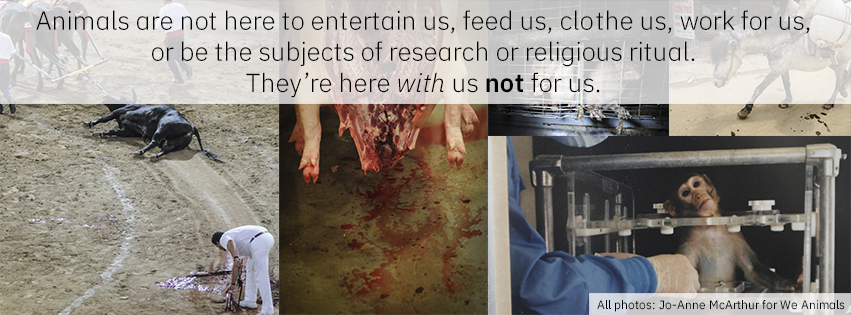
<style>
.page{position:relative;width:851px;height:315px}
.page>*{position:absolute;margin:0}
.t1{font:26px "IBMPlexSans-Light";color:#000000}
.t2{font:26px "IBMPlexSans-LightItalic";color:#000000}
.t3{font:26px "IBMPlexSans-SemiBold";color:#000000}
.t4{font:12px "IBMPlexSans";color:#000000}
</style>
<div class="page">
<p class="t1" style="left:36px;top:10px;width:774px;height:88px;text-align:center">Animals are not here to entertain us, feed us, clothe us, work for us,<br>or be the subjects of research or religious ritual.<br>They’re here <span class="t2">with </span>us <span class="t3">not</span> for us.</p>
<p class="t4" style="left:597px;top:300px;width:248px;height:12px">All photos: Jo-Anne McArthur for We Animals</p>
</div>
